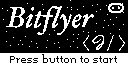
<style>
.page{position:relative;width:128px;height:64px;background:#000000}
.page>*{position:absolute;margin:0}
.t1{font:29.1px "HoeflerText-Italic";color:#ffffff}
.t2{font:8px "Memoria";color:#000000}
</style>
<div class="page">
<p class="t1" style="left:6px;top:5px;width:88px;height:31px">Bitflyer</p>
<p class="t2" style="left:10px;top:54px;width:107px;height:9px">Press button to start</p>
</div>
